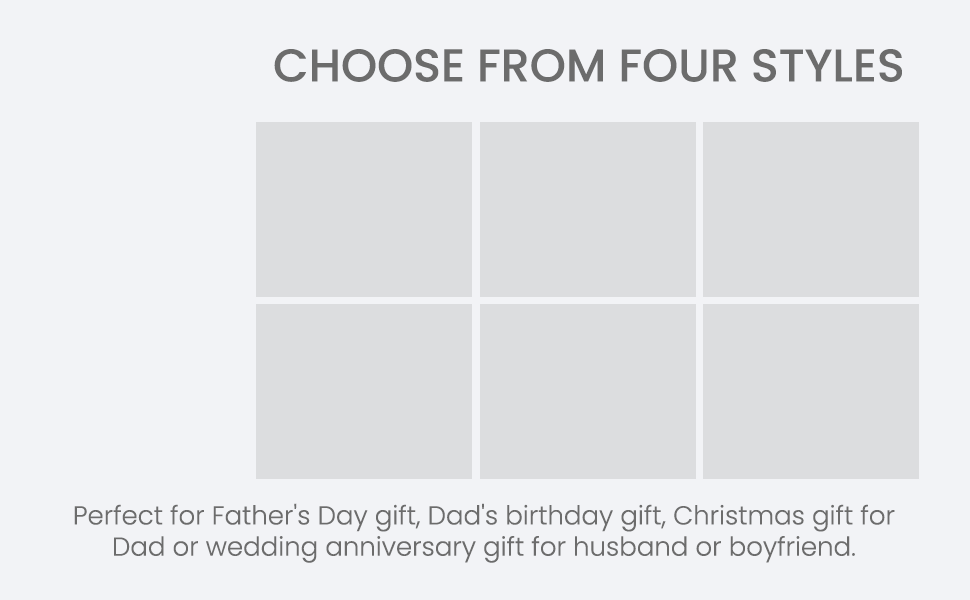
<style>
.page{position:relative;width:970px;height:600px;background:#f2f3f6}
.page>*{position:absolute;margin:0}
.t1{font:46px "Poppins-Medium";color:#6c6c6c}
.t2{font:26px "Poppins-Light";color:#6c6c6c}
</style>
<div class="page">
<p class="t1" style="left:274px;top:49px;width:628px;height:33px">CHOOSE FROM FOUR STYLES</p>
<p class="t2" style="left:74px;top:503px;width:821px;height:60px;text-align:center">Perfect for Father's Day gift, Dad's birthday gift, Christmas gift for<br>Dad or wedding anniversary gift for husband or boyfriend.</p>
</div>
